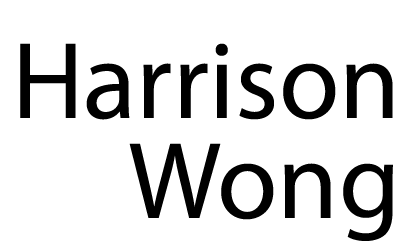
<style>
.page{position:relative;width:400px;height:250px;background:#ffffff}
.page>*{position:absolute;margin:0}
.t1{font:110px/100px "MyriadPro-Regular";color:#000000}
</style>
<div class="page">
<p class="t1" style="left:20px;top:43px;width:373px;height:198px;text-align:right">Harrison<br>Wong</p>
</div>
